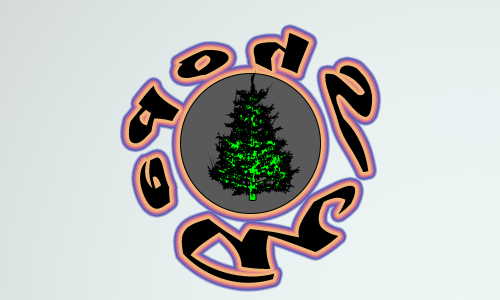
<style>
.page{position:relative;width:500px;height:300px}
.page>*{position:absolute;margin:0}
.t1{font:54.8px "MaturaMTScriptCapitals";letter-spacing:0.18em;color:#000000}
.t2{font:58.7px "MaturaMTScriptCapitals";letter-spacing:0.18em;color:#000000}
</style>
<div class="page">
<p class="t1" style="left:128px;top:33px;width:245px;height:139px;rotate:180deg">Shop</p>
<p class="t2" style="left:140px;top:157px;width:216px;height:126px;rotate:-164deg">Me</p>
</div>
